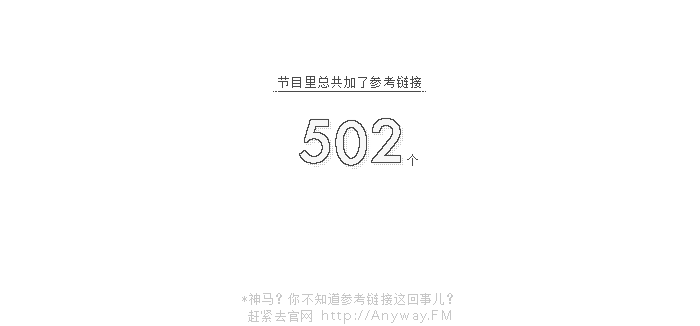
<style>
.page{position:relative;width:700px;height:326px;background:#ffffff}
.page>*{position:absolute;margin:0}
.t1{font:12px "FZXS12--GB1-0";letter-spacing:0.1em;color:#4a4a4a}
.t2{font:12px "FZXS12--GB1-0";letter-spacing:-0.08em;color:#4a4a4a}
.t3{font:12px/14px "FZXS12--GB1-0";letter-spacing:0.1em;color:#c7c7c7}
.t4{font:14px/14px "Avenir-Book";letter-spacing:0.1em;color:#c7c7c7}
</style>
<div class="page">
<p class="t1" style="left:278px;top:76px;width:143px;height:12px">节目里总共加了参考链接</p>
<p class="t2" style="left:407px;top:154px;width:11px;height:12px">个</p>
<p class="t3" style="left:242px;top:293px;width:211px;height:31px;text-align:center">*神马？你不知道参考链接这回事儿？<br>赶紧去官网 <span class="t4">http://Anyway.FM</span></p>
</div>
